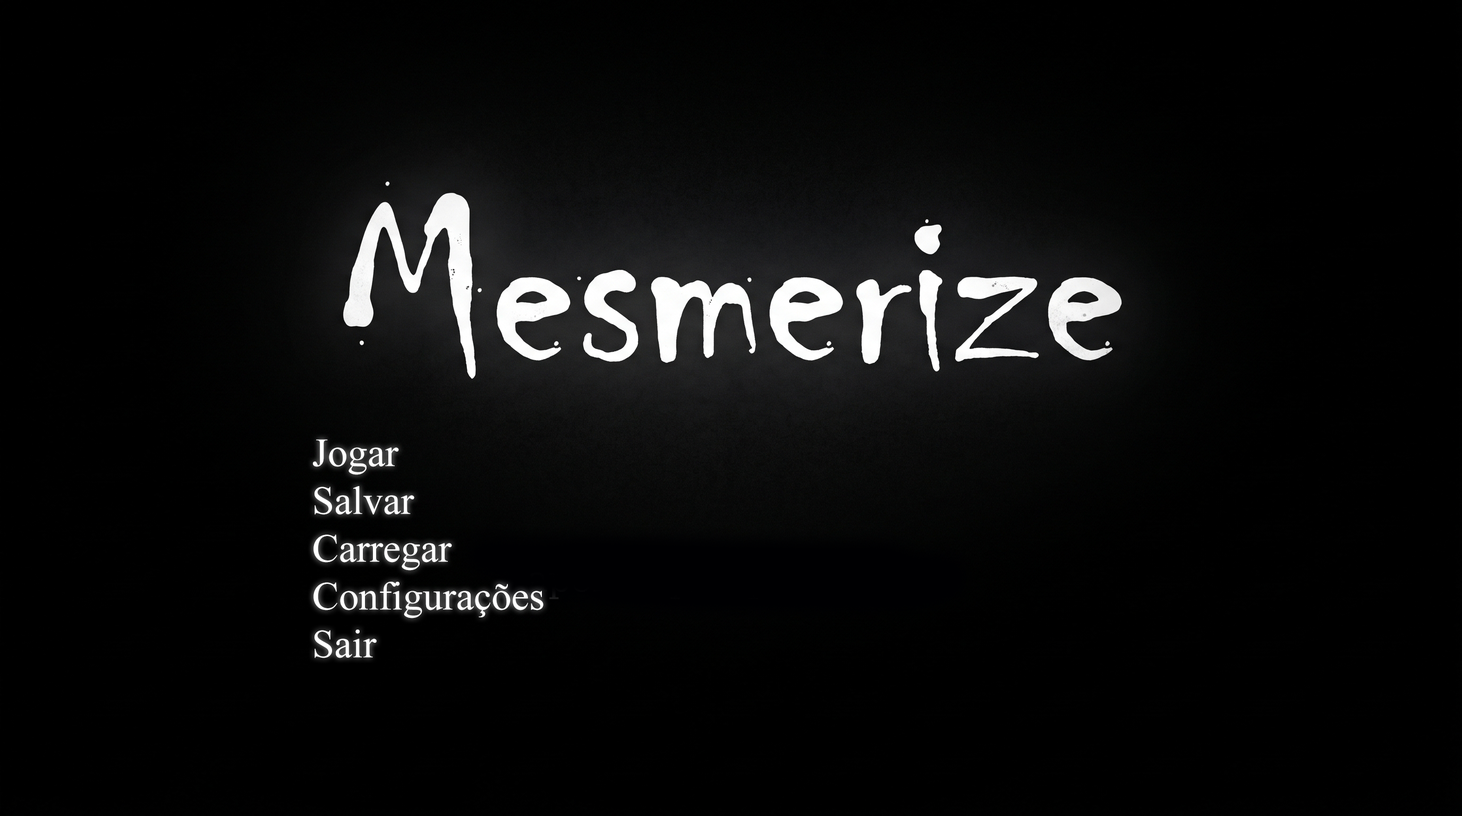
<style>
.page{position:relative;width:1462px;height:816px;background:#000000}
.page>*{position:absolute;margin:0}
.t1{font:39.8px "TimesNewRomanPSMT";color:#ffffff}
</style>
<div class="page">
<p class="t1" style="left:313px;top:439px;width:230px;height:219px">Jogar<br>Salvar<br>Carregar<br>Configurações<br>Sair</p>
</div>
